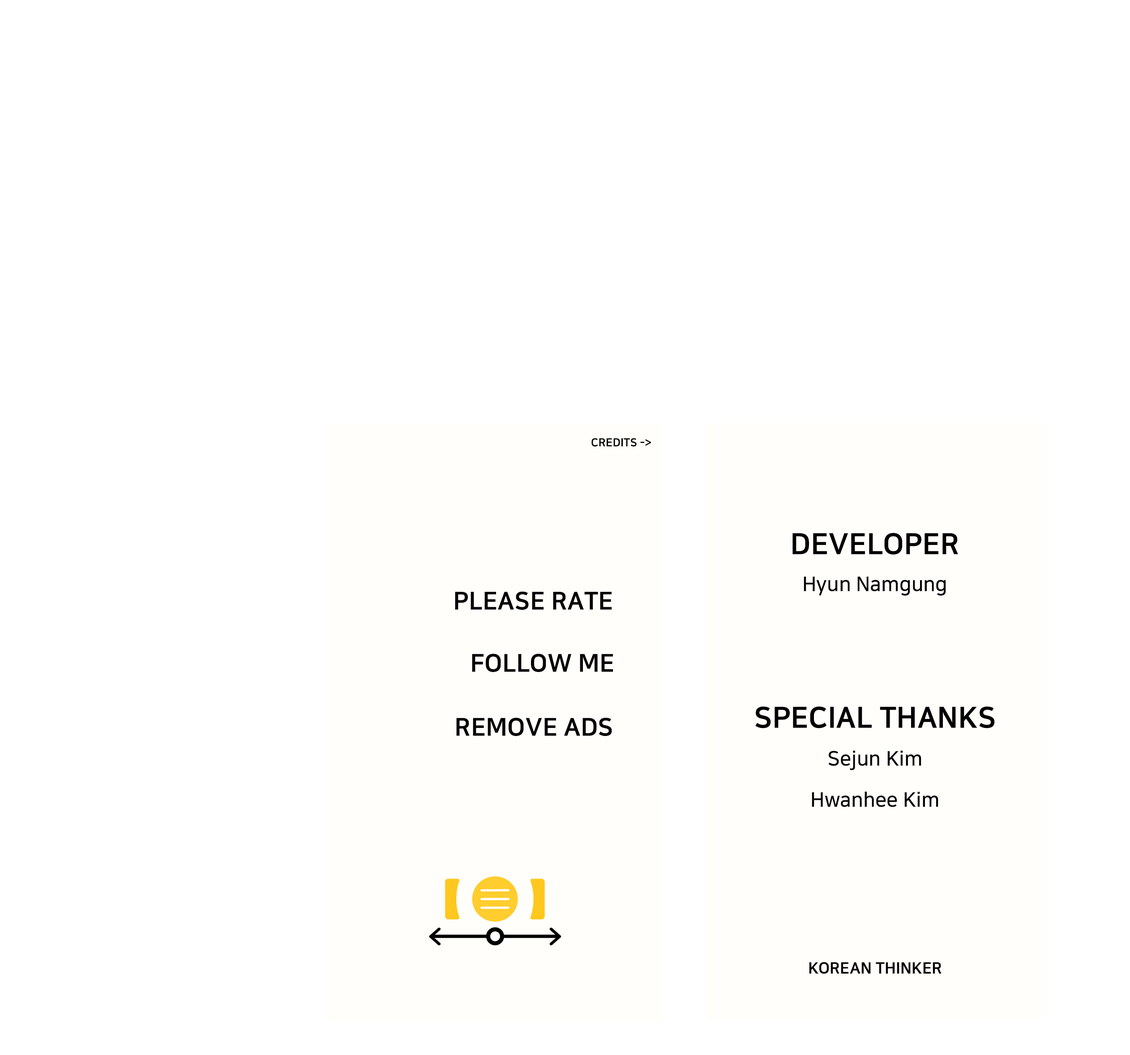
<style>
.page{position:relative;width:1130px;height:1055px;background:#ffffff}
.page>*{position:absolute;margin:0}
.t1{font:11.2px "NanumSquareEB";color:#000000}
.t2{font:29.1px "NanumSquareEB";color:#000000}
.t3{font:20.1px "NanumSquareB";color:#000000}
.t4{font:24.6px "NanumSquareEB";color:#000000}
.t5{font:15.7px "NanumSquareEB";color:#000000}
</style>
<div class="page">
<p class="t1" style="left:591px;top:438px;width:60px;height:9px">CREDITS -&gt;</p>
<p class="t2" style="left:792px;top:533px;width:166px;height:22px">DEVELOPER</p>
<p class="t3" style="left:803px;top:577px;width:143px;height:19px">Hyun Namgung</p>
<p class="t4" style="left:455px;top:592px;width:157px;height:18px">PLEASE RATE</p>
<p class="t4" style="left:472px;top:654px;width:141px;height:18px">FOLLOW ME</p>
<p class="t2" style="left:755px;top:707px;width:240px;height:22px">SPECIAL THANKS</p>
<p class="t4" style="left:456px;top:718px;width:156px;height:18px">REMOVE ADS</p>
<p class="t3" style="left:828px;top:751px;width:93px;height:20px">Sejun Kim</p>
<p class="t3" style="left:812px;top:792px;width:126px;height:15px">Hwanhee Kim</p>
<p class="t5" style="left:809px;top:962px;width:132px;height:12px">KOREAN THINKER</p>
</div>
